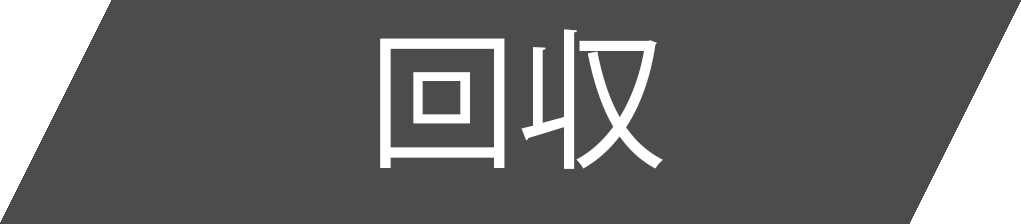
<style>
.page{position:relative;width:1021px;height:224px;background:#4c4c4c}
.page>*{position:absolute;margin:0}
.t1{font:150px "KozGoPr6N-Regular";color:#ffffff}
</style>
<div class="page">
<p class="t1" style="left:380px;top:29px;width:283px;height:140px">回収</p>
</div>
